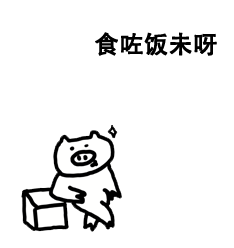
<style>
.page{position:relative;width:234px;height:248px;background:#ffffff}
.page>*{position:absolute;margin:0}
.t1{font:24px "AdobeHeitiStd-Regular";color:#000000;font-weight:bold}
</style>
<div class="page">
<p class="t1" style="left:95px;top:32px;width:122px;height:24px">食咗饭未呀</p>
</div>
